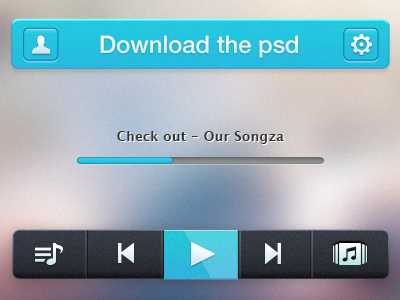
<style>
.page{position:relative;width:400px;height:300px}
.page>*{position:absolute;margin:0}
.t1{font:24px "HelveticaNeue-Medium";color:#e8f4f6}
.t2{font:13.6px "LucidaGrande-Bold";color:#333333}
</style>
<div class="page">
<p class="t1" style="left:100px;top:35px;width:198px;height:23px">Download the psd</p>
<p class="t2" style="left:117px;top:131px;width:167px;height:13px">Check out - Our Songza</p>
</div>
